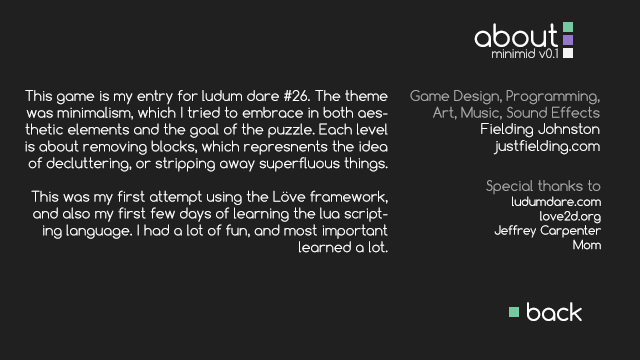
<style>
.page{position:relative;width:640px;height:360px;background:#202020}
.page>*{position:absolute;margin:0}
.t1{font:30px "Comfortaa";color:#ffffff}
.t2{font:14px "Comfortaa";color:#ffffff}
.t3{font:14px "Comfortaa";color:#a8a8a8}
.t4{font:12px "Comfortaa";color:#ffffff}
.t5{font:24px "Comfortaa";color:#ffffff}
</style>
<div class="page">
<p class="t1" style="left:474px;top:23px;width:84px;height:24px">about</p>
<p class="t2" style="left:25px;top:90px;width:363px;height:163px;text-align:right">This game is my entry for ludum dare #26. The theme was minimalism, which I tried to embrace in both aesthetic elements and the goal of the puzzle. Each level is about removing blocks, which represnents the idea of decluttering, or stripping away superfluous things.<br><br>This was my first attempt using the Löve framework, and also my first few days of learning the lua scripting language. I had a lot of fun, and most important learned a lot.</p>
<p class="t3" style="left:410px;top:90px;width:190px;height:30px;text-align:right">Game Design, Programming,<br>Art, Music, Sound Effects</p>
<p class="t2" style="left:481px;top:123px;width:119px;height:32px;text-align:right">Fielding Johnston<br>justfielding.com</p>
<p class="t3" style="left:486px;top:180px;width:115px;height:15px">Special thanks to</p>
<p class="t4" style="left:494px;top:196px;width:107px;height:54px;text-align:right">ludumdare.com<br>love2d.org<br>Jeffrey Carpenter<br>Mom</p>
<p class="t5" style="left:527px;top:302px;width:55px;height:19px">back</p>
</div>
